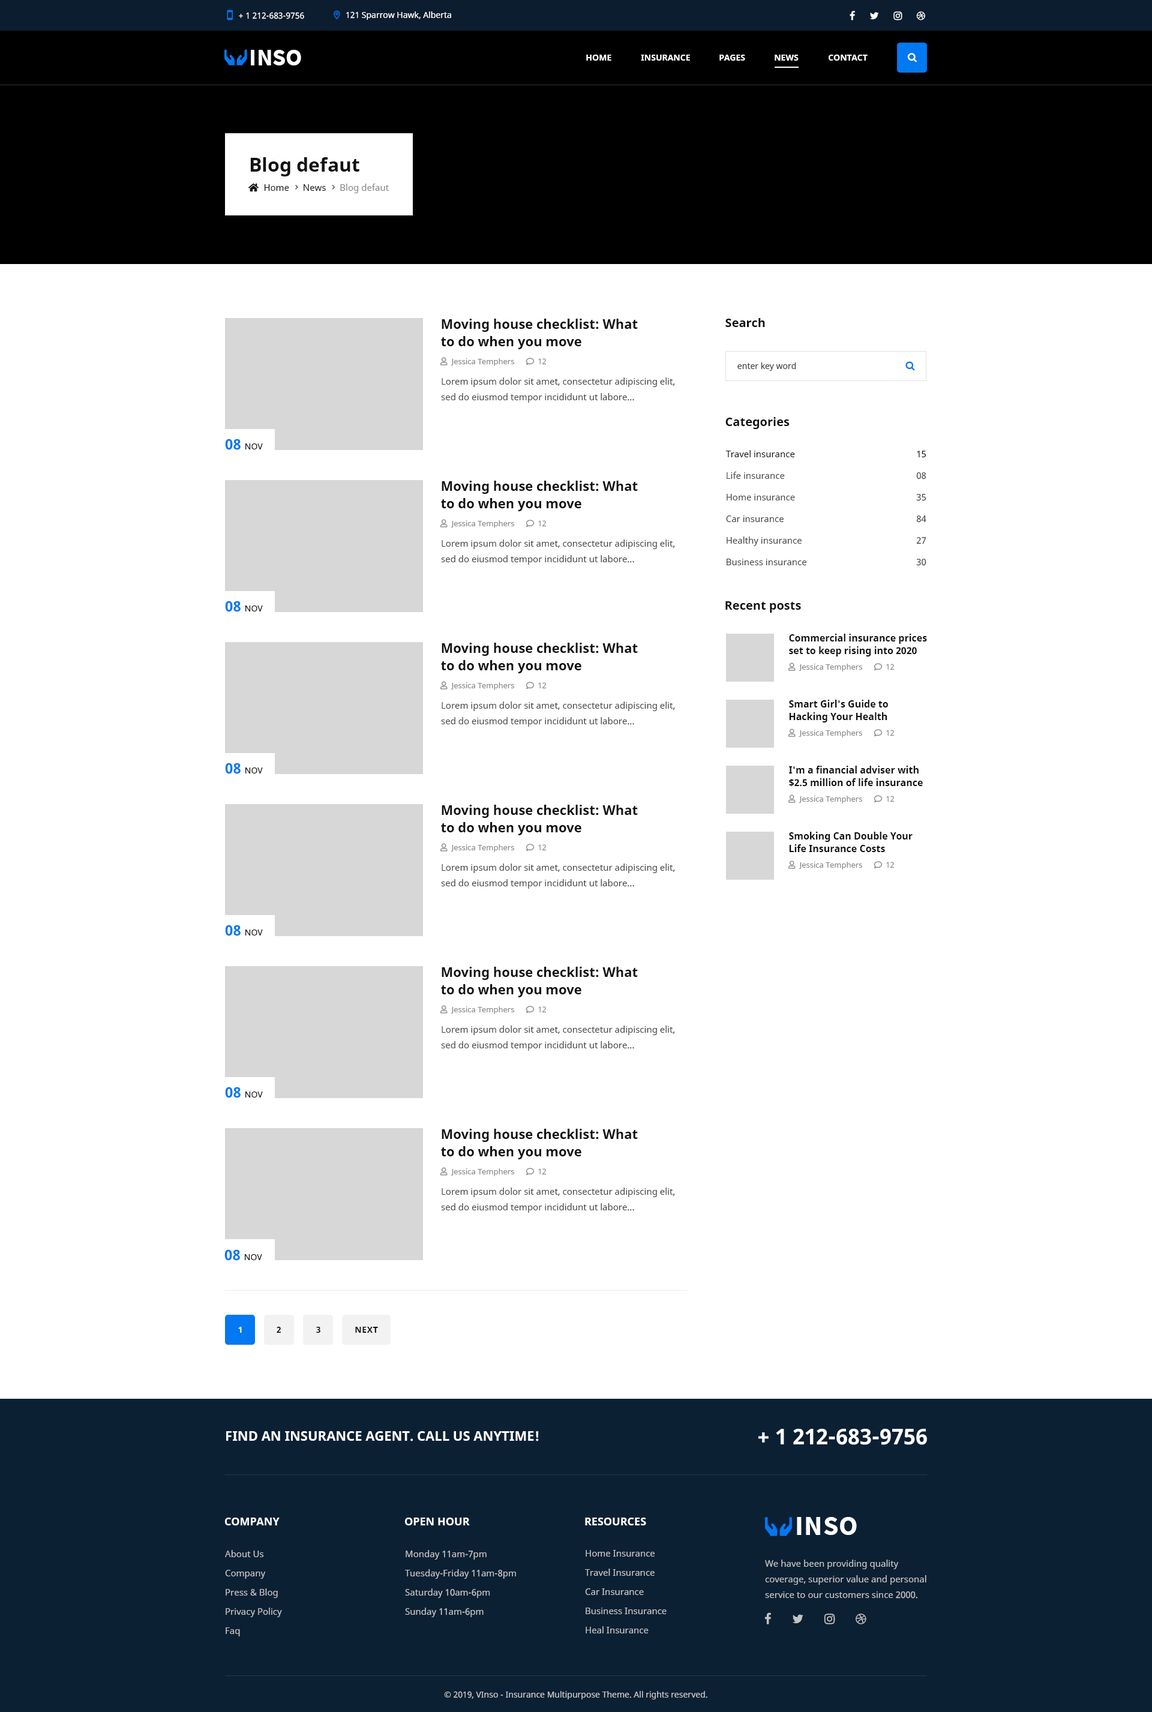
<style>
.page{position:relative;width:1152px;height:1712px;background:#ffffff}
.page>*{position:absolute;margin:0}
.t1{font:8.4px "NotoSans";color:#ffffff}
.t2{font:24px "SourceSansPro-Bold";color:#ffffff;text-transform:uppercase}
.t3{font:8.4px "NotoSans-Bold";color:#ffffff;text-transform:uppercase}
.t4{font:19.2px "NotoSans-Bold";color:#111111}
.t5{font:12px "NotoSans-Bold";color:#111111}
.t6{font:13.2px/17.4px "NotoSans-Bold";color:#111111}
.t7{font:7.8px "NotoSans";color:#888888}
.t8{font:7.8px "FontAwesome5FreeRegular";color:#888888}
.t9{font:8.4px "NotoSans";color:#444444}
.t10{font:9px/15.6px "NotoSans";color:#444444}
.t11{font:8.4px "NotoSans";color:#111111;text-transform:uppercase}
.t12{font:14.4px "NotoSans-Bold";color:#0278f2;text-transform:uppercase}
.t13{font:9px/21.6px "NotoSans";color:#444444}
.t14{font:9px/21.6px "NotoSans";color:#111111}
.t15{font:9.6px/12.6px "NotoSans-Bold";color:#111111}
.t16{font:8.4px "NotoSans-Bold";letter-spacing:0.05em;color:#111111;text-transform:uppercase}
.t17{font:8.4px "NotoSans-Bold";letter-spacing:0.05em;color:#ffffff;text-transform:uppercase}
.t18{font:13.2px "NotoSans-Bold";color:#ffffff;text-transform:uppercase}
.t19{font:21.6px "NotoSans-Bold";color:#ffffff;text-transform:uppercase}
.t20{font:10.8px "NotoSans-Bold";color:#ffffff}
.t21{font:10.8px "NotoSans-Bold";color:#ffffff;text-transform:uppercase}
.t22{font:27.6px "SourceSansPro-Bold";letter-spacing:0.025em;color:#ffffff;text-transform:uppercase}
.t23{font:9px/19.2px "NotoSans";color:#c4c4c4}
.t24{font:9px/15.6px "NotoSans";color:#c4c4c4}
.t25{font:8.4px "NotoSans";color:#c4c4c4}
</style>
<div class="page">
<p class="t1" style="left:239px;top:12px;width:65px;height:7px">+ 1 212-683-9756</p>
<p class="t1" style="left:346px;top:11px;width:105px;height:9px">121 Sparrow Hawk, Alberta</p>
<p class="t2" style="left:251px;top:50px;width:50px;height:15px">inso</p>
<p class="t3" style="left:586px;top:55px;width:25px;height:6px">Home</p>
<p class="t3" style="left:641px;top:55px;width:49px;height:6px">Insurance</p>
<p class="t3" style="left:719px;top:55px;width:26px;height:6px">Pages</p>
<p class="t3" style="left:775px;top:55px;width:24px;height:6px">News</p>
<p class="t3" style="left:829px;top:55px;width:39px;height:6px">COntact</p>
<p class="t4" style="left:250px;top:157px;width:109px;height:19px">Blog defaut</p>
<p class="t5" style="left:725px;top:318px;width:40px;height:9px">Search</p>
<p class="t6" style="left:441px;top:319px;width:197px;height:30px">Moving house checklist: What<br>to do when you move</p>
<p class="t7" style="left:440px;top:357px;width:107px;height:9px"><span class="t8">User  </span>Jessica Temphers      <span class="t8">comment  </span>12</p>
<p class="t9" style="left:737px;top:362px;width:59px;height:9px">enter key word</p>
<p class="t10" style="left:441px;top:377px;width:234px;height:26px">Lorem ipsum dolor sit amet, consectetur adipiscing elit, sed do eiusmod tempor incididunt ut labore...</p>
<p class="t5" style="left:725px;top:417px;width:65px;height:12px">Categories</p>
<p class="t11" style="left:225px;top:439px;width:38px;height:11px"><span class="t12">08 </span>Nov</p>
<p class="t13" style="left:725px;top:450px;width:81px;height:115px"><span class="t14">Travel insurance<br></span>Life insurance<br>Home insurance<br>Car insurance<br>Healthy insurance<br>Business insurance</p>
<p class="t13" style="left:916px;top:451px;width:10px;height:115px;text-align:right"><span class="t14">15<br></span>08<br>35<br>84<br>27<br>30</p>
<p class="t6" style="left:441px;top:481px;width:197px;height:30px">Moving house checklist: What<br>to do when you move</p>
<p class="t7" style="left:440px;top:519px;width:107px;height:9px"><span class="t8">User  </span>Jessica Temphers      <span class="t8">comment  </span>12</p>
<p class="t10" style="left:441px;top:539px;width:234px;height:26px">Lorem ipsum dolor sit amet, consectetur adipiscing elit, sed do eiusmod tempor incididunt ut labore...</p>
<p class="t11" style="left:225px;top:601px;width:38px;height:11px"><span class="t12">08 </span>Nov</p>
<p class="t5" style="left:725px;top:601px;width:76px;height:12px">Recent posts</p>
<p class="t15" style="left:789px;top:634px;width:138px;height:22px">Commercial insurance prices<br>set to keep rising into 2020</p>
<p class="t6" style="left:441px;top:643px;width:197px;height:30px">Moving house checklist: What<br>to do when you move</p>
<p class="t7" style="left:788px;top:662px;width:107px;height:9px"><span class="t8">User  </span>Jessica Temphers      <span class="t8">comment  </span>12</p>
<p class="t7" style="left:440px;top:681px;width:107px;height:9px"><span class="t8">User  </span>Jessica Temphers      <span class="t8">comment  </span>12</p>
<p class="t10" style="left:441px;top:701px;width:234px;height:26px">Lorem ipsum dolor sit amet, consectetur adipiscing elit, sed do eiusmod tempor incididunt ut labore...</p>
<p class="t15" style="left:789px;top:700px;width:99px;height:22px">Smart Girl's Guide to<br>Hacking Your Health</p>
<p class="t7" style="left:788px;top:728px;width:107px;height:9px"><span class="t8">User  </span>Jessica Temphers      <span class="t8">comment  </span>12</p>
<p class="t11" style="left:225px;top:763px;width:38px;height:11px"><span class="t12">08 </span>Nov</p>
<p class="t15" style="left:789px;top:766px;width:134px;height:21px">I'm a financial adviser with<br>$2.5 million of life insurance</p>
<p class="t7" style="left:788px;top:794px;width:107px;height:9px"><span class="t8">User  </span>Jessica Temphers      <span class="t8">comment  </span>12</p>
<p class="t6" style="left:441px;top:805px;width:197px;height:30px">Moving house checklist: What<br>to do when you move</p>
<p class="t15" style="left:789px;top:832px;width:124px;height:20px">Smoking Can Double Your<br>Life Insurance Costs</p>
<p class="t7" style="left:440px;top:843px;width:107px;height:9px"><span class="t8">User  </span>Jessica Temphers      <span class="t8">comment  </span>12</p>
<p class="t10" style="left:441px;top:863px;width:234px;height:26px">Lorem ipsum dolor sit amet, consectetur adipiscing elit, sed do eiusmod tempor incididunt ut labore...</p>
<p class="t7" style="left:788px;top:860px;width:107px;height:9px"><span class="t8">User  </span>Jessica Temphers      <span class="t8">comment  </span>12</p>
<p class="t11" style="left:225px;top:925px;width:38px;height:11px"><span class="t12">08 </span>Nov</p>
<p class="t6" style="left:441px;top:967px;width:197px;height:30px">Moving house checklist: What<br>to do when you move</p>
<p class="t7" style="left:440px;top:1005px;width:107px;height:9px"><span class="t8">User  </span>Jessica Temphers      <span class="t8">comment  </span>12</p>
<p class="t10" style="left:441px;top:1025px;width:234px;height:26px">Lorem ipsum dolor sit amet, consectetur adipiscing elit, sed do eiusmod tempor incididunt ut labore...</p>
<p class="t11" style="left:225px;top:1087px;width:38px;height:11px"><span class="t12">08 </span>Nov</p>
<p class="t6" style="left:441px;top:1129px;width:197px;height:30px">Moving house checklist: What<br>to do when you move</p>
<p class="t7" style="left:440px;top:1167px;width:107px;height:9px"><span class="t8">User  </span>Jessica Temphers      <span class="t8">comment  </span>12</p>
<p class="t10" style="left:441px;top:1187px;width:234px;height:26px">Lorem ipsum dolor sit amet, consectetur adipiscing elit, sed do eiusmod tempor incididunt ut labore...</p>
<p class="t11" style="left:224px;top:1249px;width:38px;height:12px"><span class="t12">08 </span>Nov</p>
<p class="t16" style="left:277px;top:1326px;width:4px;height:7px">2</p>
<p class="t16" style="left:316px;top:1326px;width:4px;height:7px">3</p>
<p class="t17" style="left:238px;top:1327px;width:4px;height:6px">1</p>
<p class="t16" style="left:355px;top:1327px;width:23px;height:6px">Next</p>
<p class="t18" style="left:226px;top:1431px;width:313px;height:10px">Find an Insurance agent. Call us anytime!</p>
<p class="t19" style="left:758px;top:1429px;width:169px;height:16px">+ 1 212-683-9756</p>
<p class="t20" style="left:225px;top:1517px;width:55px;height:8px">COMPANY</p>
<p class="t21" style="left:405px;top:1517px;width:65px;height:8px">Open hour</p>
<p class="t21" style="left:585px;top:1517px;width:61px;height:8px">RESOURCES</p>
<p class="t22" style="left:797px;top:1517px;width:60px;height:18px">Inso</p>
<p class="t23" style="left:225px;top:1550px;width:57px;height:86px">About Us<br>Company<br>Press &amp; Blog<br>Privacy Policy<br>Faq</p>
<p class="t23" style="left:405px;top:1550px;width:111px;height:67px">Monday 11am-7pm<br>Tuesday-Friday 11am-8pm<br>Saturday 10am-6pm<br>Sunday 11am-6pm</p>
<p class="t23" style="left:585px;top:1550px;width:82px;height:83px">Home Insurance<br>Travel Insurance<br>Car Insurance<br>Business Insurance<br>Heal Insurance</p>
<p class="t24" style="left:765px;top:1559px;width:161px;height:39px">We have been providing quality coverage, superior value and personal service to our customers since 2000.</p>
<p class="t25" style="left:444px;top:1691px;width:263px;height:8px">© 2019, VInso - Insurance Multipurpose Theme. All rights reserved.</p>
</div>
